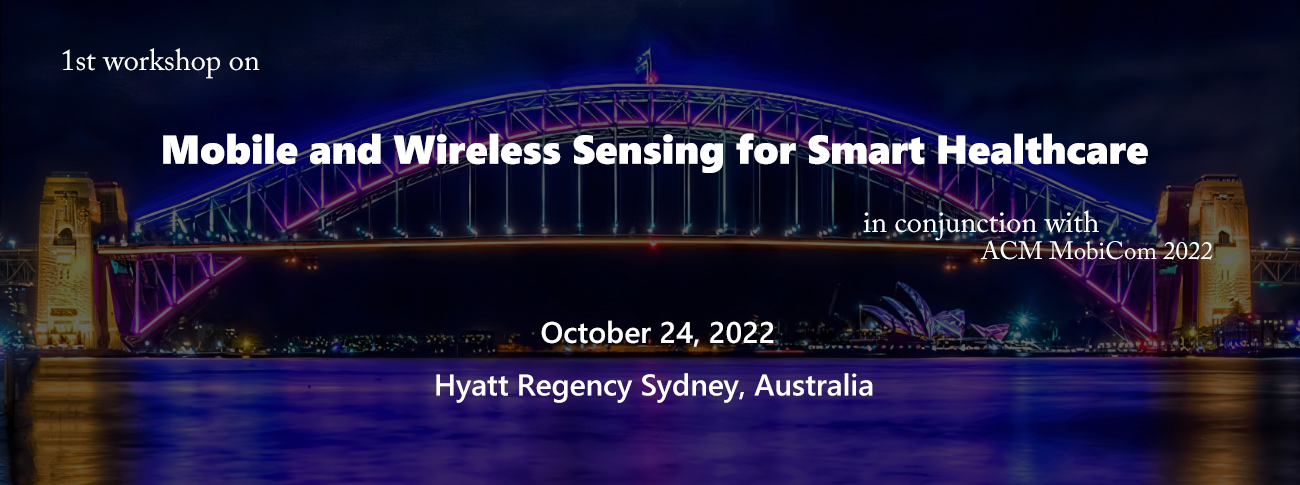
<style>
.page{position:relative;width:1300px;height:485px}
.page>*{position:absolute;margin:0}
.t1{font:30px "ACaslonPro-Regular";color:#ffffff}
.t2{font:40px "SegoeUIBlack";color:#ffffff}
.t3{font:25px "ACaslonPro-Regular";color:#ffffff}
.t4{font:30px "SegoeUI-Semibold";color:#ffffff}
</style>
<div class="page">
<p class="t1" style="left:62px;top:48px;width:198px;height:31px">1st workshop on</p>
<p class="t2" style="left:163px;top:133px;width:985px;height:40px">Mobile and Wireless Sensing for Smart Healthcare</p>
<p class="t1" style="left:863px;top:210px;width:236px;height:31px">in conjunction with</p>
<p class="t3" style="left:981px;top:240px;width:232px;height:20px">ACM MobiCom 2022</p>
<p class="t4" style="left:436px;top:320px;width:437px;height:83px;text-align:center">October 24, 2022<br>Hyatt Regency Sydney, Australia</p>
</div>
